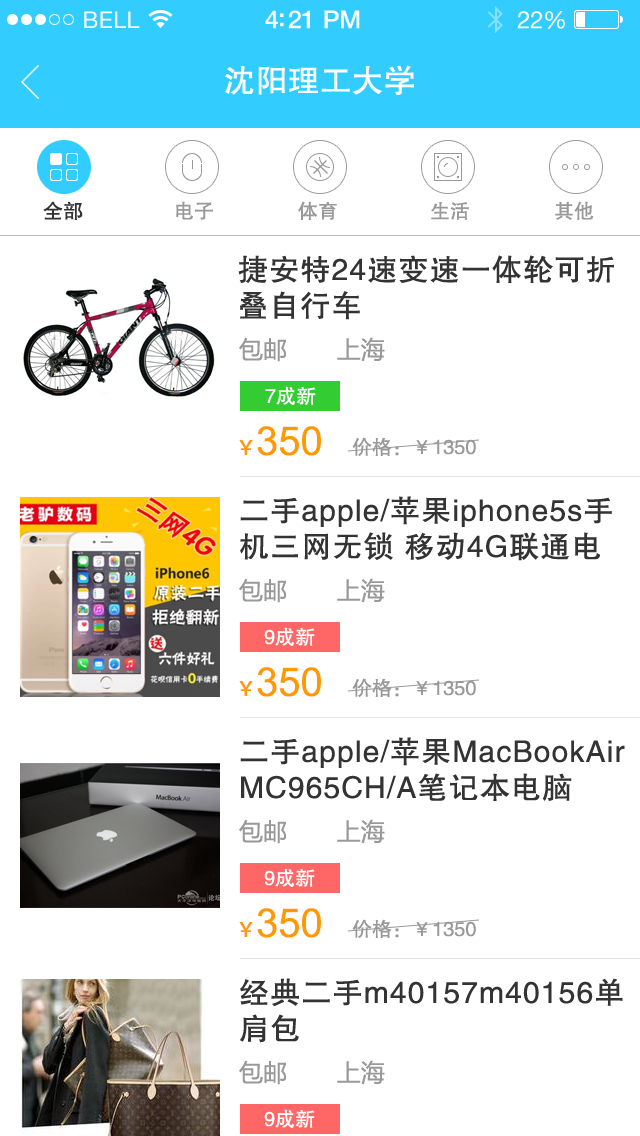
<style>
.page{position:relative;width:640px;height:1136px;background:#ffffff}
.page>*{position:absolute;margin:0}
.t1{font:23px "HelveticaNeue";letter-spacing:0.02em;color:#ffffff}
.t2{font:25px "HelveticaNeue-Medium";letter-spacing:-0.02em;color:#ffffff}
.t3{font:24px "HelveticaNeue";letter-spacing:-0.02em;color:#ffffff}
.t4{font:32px "FZHTJW--GB1-0";color:#ffffff}
.t5{font:20px "FZHTJW--GB1-0";color:#333333}
.t6{font:20px "FZHTJW--GB1-0";color:#999999}
.t7{font:30px/36px "FZHTJW--GB1-0";letter-spacing:0.04em;color:#333333}
.t8{font:24px "MicrosoftYaHei";color:#999999}
.t9{font:20px "FZHTJW--GB1-0";color:#ffffff}
.t10{font:40px "ArialMT";color:#ff9900}
.t11{font:20px "AdobeHeitiStd-Regular";color:#ff9900}
</style>
<div class="page">
<p class="t1" style="left:84px;top:11px;width:56px;height:17px">BELL</p>
<p class="t2" style="left:265px;top:10px;width:95px;height:19px">4:21 PM</p>
<p class="t3" style="left:517px;top:11px;width:48px;height:18px">22%</p>
<p class="t4" style="left:225px;top:65px;width:189px;height:30px">沈阳理工大学</p>
<p class="t5" style="left:43px;top:201px;width:40px;height:19px">全部</p>
<p class="t6" style="left:176px;top:201px;width:37px;height:19px">电子</p>
<p class="t6" style="left:298px;top:201px;width:39px;height:19px">体育</p>
<p class="t6" style="left:431px;top:202px;width:38px;height:18px">生活</p>
<p class="t6" style="left:555px;top:201px;width:39px;height:19px">其他</p>
<p class="t7" style="left:238px;top:255px;width:376px;height:65px">捷安特24速变速一体轮可折<br>叠自行车</p>
<p class="t8" style="left:239px;top:337px;width:146px;height:25px">包邮       上海</p>
<p class="t9" style="left:265px;top:386px;width:51px;height:19px">7成新</p>
<p class="t10" style="left:239px;top:426px;width:82px;height:30px"><span class="t11">￥</span>350</p>
<p class="t6" style="left:352px;top:437px;width:124px;height:19px">价格：￥1350</p>
<p class="t7" style="left:240px;top:496px;width:372px;height:65px">二手apple/苹果iphone5s手<br>机三网无锁 移动4G联通电</p>
<p class="t8" style="left:239px;top:578px;width:146px;height:25px">包邮       上海</p>
<p class="t9" style="left:264px;top:627px;width:51px;height:19px">9成新</p>
<p class="t10" style="left:239px;top:667px;width:82px;height:30px"><span class="t11">￥</span>350</p>
<p class="t6" style="left:352px;top:678px;width:124px;height:19px">价格：￥1350</p>
<p class="t7" style="left:240px;top:737px;width:385px;height:64px">二手apple/苹果MacBookAir<br>MC965CH/A笔记本电脑</p>
<p class="t8" style="left:239px;top:819px;width:146px;height:25px">包邮       上海</p>
<p class="t9" style="left:264px;top:868px;width:51px;height:19px">9成新</p>
<p class="t10" style="left:239px;top:908px;width:82px;height:30px"><span class="t11">￥</span>350</p>
<p class="t6" style="left:352px;top:919px;width:124px;height:19px">价格：￥1350</p>
<p class="t7" style="left:240px;top:978px;width:383px;height:65px">经典二手m40157m40156单<br>肩包</p>
<p class="t8" style="left:239px;top:1060px;width:146px;height:25px">包邮       上海</p>
<p class="t9" style="left:264px;top:1109px;width:51px;height:19px">9成新</p>
</div>
